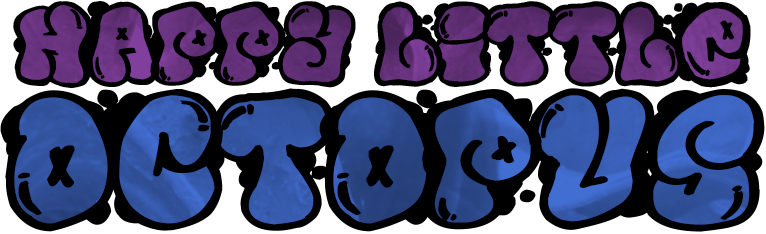
<style>
.page{position:relative;width:766px;height:234px;background:#000000}
.page>*{position:absolute;margin:0}
.t1{font:92px "El&FontBubble";letter-spacing:-0.02em;color:#000000}
.t2{font:153px "El&FontBubble";letter-spacing:-0.02em;color:#000000}
</style>
<div class="page">
<p class="t1" style="left:13px;top:1px;width:738px;height:87px">Happy Little</p>
<p class="t2" style="left:0px;top:88px;width:765px;height:144px">Octopus</p>
</div>
